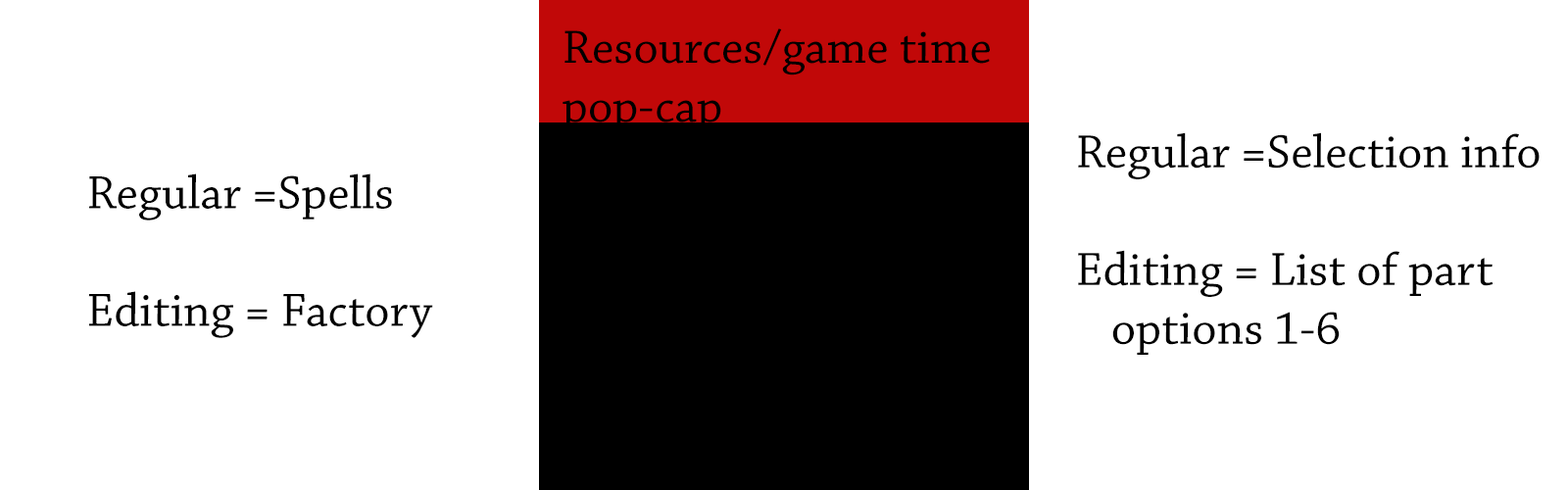
<style>
.page{position:relative;width:1568px;height:490px;background:#ffffff}
.page>*{position:absolute;margin:0}
.t1{font:49px "ChaparralPro-Regular";color:#000000}
</style>
<div class="page">
<p class="t1" style="left:563px;top:28px;width:427px;height:105px">Resources/game time<br>pop-cap</p>
<p class="t1" style="left:1078px;top:132px;width:462px;height:223px">Regular =Selection info<br><br>Editing = List of part <br> options 1-6</p>
<p class="t1" style="left:88px;top:173px;width:345px;height:165px">Regular =Spells<br><br>Editing = Factory</p>
</div>
